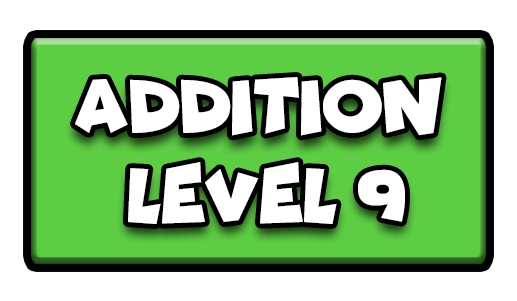
<style>
.page{position:relative;width:517px;height:301px;background:#ffffff}
.page>*{position:absolute;margin:0}
.t1{font:77.7px "Funhouse";color:#ffffff;scale:0.95 1}
</style>
<div class="page">
<p class="t1" style="left:75px;top:77px;width:367px;height:59px">ADDITION</p>
<p class="t1" style="left:128px;top:162px;width:277px;height:62px">LEVEL 9</p>
</div>
